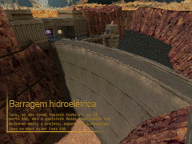
<style>
.page{position:relative;width:192px;height:144px}
.page>*{position:absolute;margin:0}
.t1{font:9px "ArialMT";color:#99782a;scale:0.96 1}
.t2{font:4px "Consolas-Bold";color:#705421;scale:0.96 1}
</style>
<div class="page">
<p class="t1" style="left:9px;top:99px;width:88px;height:10px">Barragem hidroelétrica</p>
<p class="t2" style="left:8px;top:113px;width:102px;height:18px">Cara, eu não dormi fazendo texturas, eu tô <br>morto kkk, mas a qualidade dessa atualização irá <br>melhorar muito o projeto, espero que aproveitem, <br>isso se você achar isso kkk</p>
</div>
